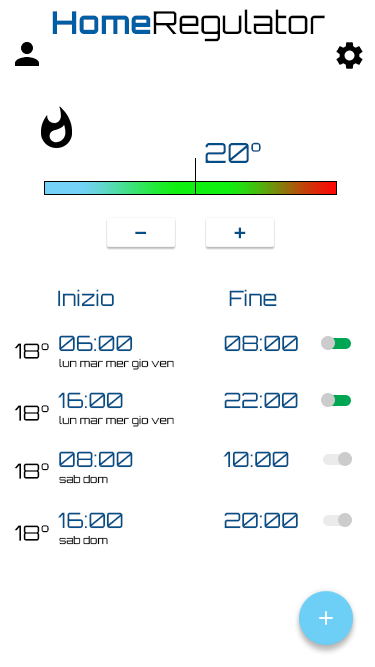
<style>
.page{position:relative;width:375px;height:667px;background:#ffffff}
.page>*{position:absolute;margin:0}
.t1{font:31.8px "Orbitron-Regular";color:#000000}
.t2{font:31.8px "Orbitron-Bold";color:#015da4}
.t3{font:27.6px "Orbitron-Regular";color:#034e87}
.t4{font:21.2px "Orbitron-Regular";color:#034e87}
.t5{font:21.2px "Orbitron-Regular";color:#000000}
.t6{font:10.6px "Orbitron-Regular";color:#000000}
</style>
<div class="page">
<p class="t1" style="left:52px;top:9px;width:273px;height:33px"><span class="t2">Home</span>Regulator</p>
<p class="t3" style="left:205px;top:142px;width:56px;height:21px">20°</p>
<p class="t3" style="left:135px;top:231px;width:11px;height:3px">-</p>
<p class="t3" style="left:234px;top:227px;width:12px;height:12px">+</p>
<p class="t4" style="left:58px;top:289px;width:56px;height:18px">Inizio</p>
<p class="t4" style="left:229px;top:289px;width:48px;height:18px">Fine</p>
<p class="t4" style="left:59px;top:335px;width:74px;height:17px">06:00</p>
<p class="t4" style="left:224px;top:335px;width:74px;height:17px">08:00</p>
<p class="t5" style="left:14px;top:343px;width:35px;height:16px">18°</p>
<p class="t6" style="left:59px;top:358px;width:115px;height:12px">lun mar mer gio ven</p>
<p class="t4" style="left:58px;top:392px;width:65px;height:17px">16:00</p>
<p class="t4" style="left:224px;top:392px;width:74px;height:17px">22:00</p>
<p class="t5" style="left:14px;top:405px;width:35px;height:16px">18°</p>
<p class="t6" style="left:59px;top:415px;width:115px;height:12px">lun mar mer gio ven</p>
<p class="t4" style="left:59px;top:451px;width:74px;height:17px">08:00</p>
<p class="t4" style="left:223px;top:451px;width:66px;height:17px">10:00</p>
<p class="t5" style="left:14px;top:463px;width:35px;height:16px">18°</p>
<p class="t6" style="left:59px;top:474px;width:49px;height:10px">sab dom</p>
<p class="t4" style="left:58px;top:512px;width:65px;height:17px">16:00</p>
<p class="t4" style="left:224px;top:512px;width:74px;height:17px">20:00</p>
<p class="t5" style="left:14px;top:525px;width:35px;height:16px">18°</p>
<p class="t6" style="left:59px;top:535px;width:49px;height:10px">sab dom</p>
</div>
